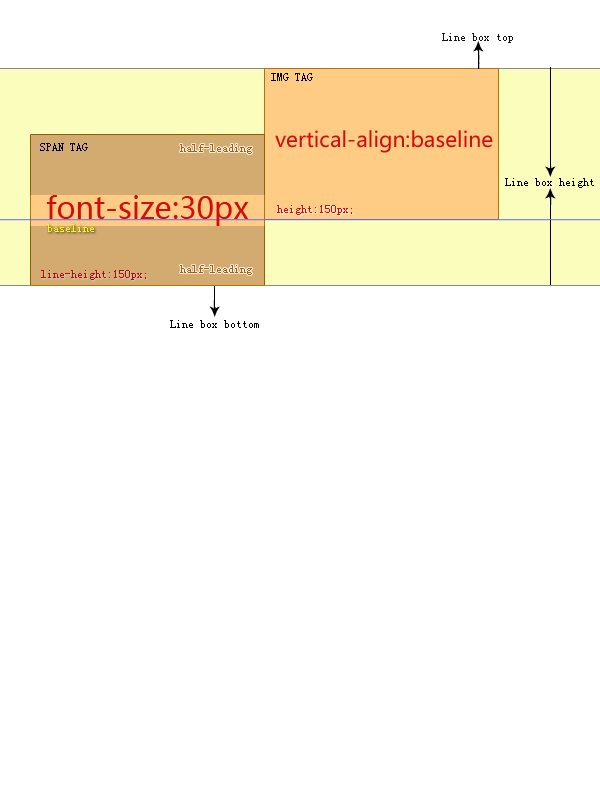
<style>
.page{position:relative;width:600px;height:800px;background:#ffffff}
.page>*{position:absolute;margin:0}
.t1{font:12px "SimSun";color:#000000}
.t2{font:21px "MicrosoftYaHei";color:#d30d0d}
.t3{font:30px "MicrosoftYaHei";color:#d30d0d}
.t4{font:12px "SimSun";color:#d30d0d}
.t5{font:12px "SimSun";color:#f6ff00}
.t6{font:12px "SimSun";color:#af0b0b}
</style>
<div class="page">
<p class="t1" style="left:271px;top:73px;width:42px;height:8px">IMG TAG</p>
<p class="t2" style="left:275px;top:130px;width:218px;height:23px">vertical-align:baseline</p>
<p class="t1" style="left:40px;top:143px;width:48px;height:8px">SPAN TAG</p>
<p class="t1" style="left:505px;top:178px;width:89px;height:10px">Line box height</p>
<p class="t3" style="left:46px;top:195px;width:203px;height:31px">font-size:30px</p>
<p class="t4" style="left:277px;top:205px;width:75px;height:10px">height:150px;</p>
<p class="t5" style="left:47px;top:224px;width:47px;height:8px">baseline</p>
<p class="t6" style="left:41px;top:270px;width:105px;height:10px">line-height:150px;</p>
</div>
